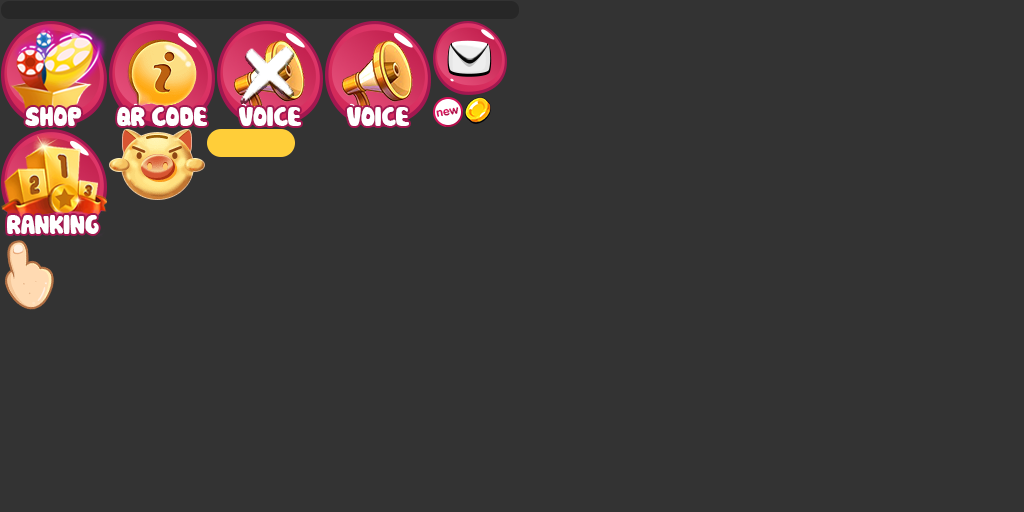
<style>
.page{position:relative;width:1024px;height:512px;background:#333333}
.page>*{position:absolute;margin:0}
.t1{font:25.6px "Cookies";letter-spacing:-0.04em;color:#ffffff}
</style>
<div class="page">
<p class="t1" style="left:25px;top:107px;width:57px;height:19px">SHOP</p>
<p class="t1" style="left:117px;top:107px;width:90px;height:19px">QR CODE</p>
<p class="t1" style="left:239px;top:107px;width:62px;height:19px">VOICE</p>
<p class="t1" style="left:347px;top:107px;width:62px;height:19px">VOICE</p>
<p class="t1" style="left:7px;top:215px;width:92px;height:19px">RANKING</p>
</div>
